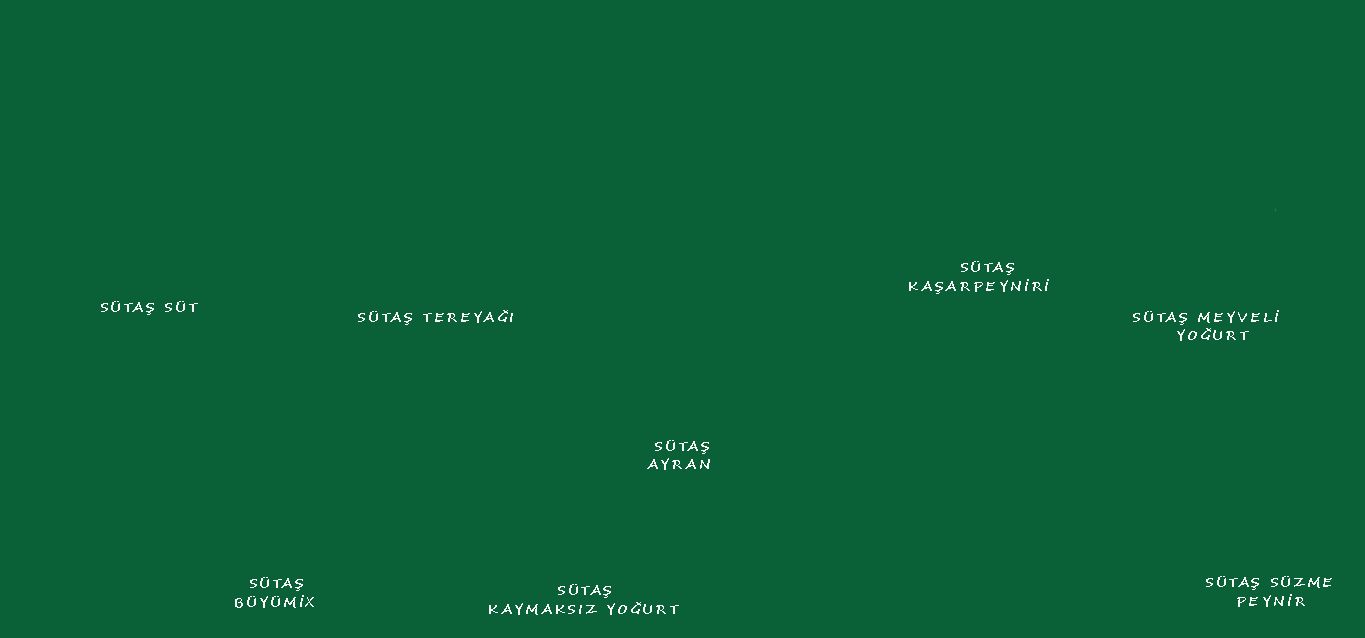
<style>
.page{position:relative;width:1365px;height:638px;background:#0a6137}
.page>*{position:absolute;margin:0}
.t1{font:13.3px/18.7px "SegoeScript-Bold";letter-spacing:0.2em;color:#f7f7f7}
.t2{font:13.3px "SegoeScript-Bold";letter-spacing:0.2em;color:#f7f7f7}
</style>
<div class="page">
<p class="t1" style="left:909px;top:261px;width:140px;height:33px">SÜTAŞ <br>KAŞARPEYNİRİ</p>
<p class="t2" style="left:101px;top:301px;width:97px;height:14px">SÜTAŞ SÜT</p>
<p class="t2" style="left:358px;top:310px;width:155px;height:15px">SÜTAŞ TEREYAĞI</p>
<p class="t1" style="left:1133px;top:310px;width:146px;height:31px">SÜTAŞ MEYVELİ<br>  YOĞURT</p>
<p class="t1" style="left:647px;top:440px;width:63px;height:30px">SÜTAŞ <br>AYRAN</p>
<p class="t1" style="left:235px;top:577px;width:79px;height:31px">SÜTAŞ <br>BÜYÜMİX</p>
<p class="t1" style="left:1206px;top:576px;width:126px;height:31px">SÜTAŞ SÜZME<br>    PEYNİR</p>
<p class="t1" style="left:489px;top:584px;width:190px;height:31px">SÜTAŞ <br>KAYMAKSIZ YOĞURT</p>
</div>
